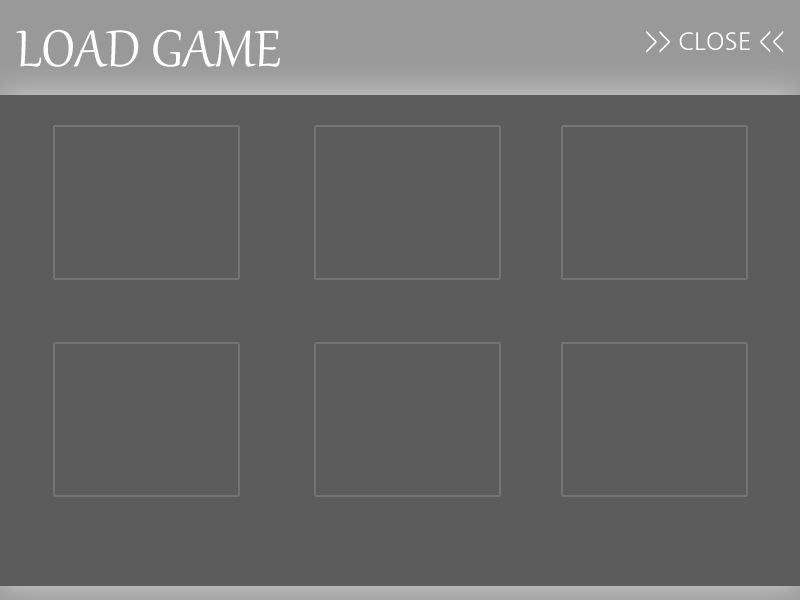
<style>
.page{position:relative;width:800px;height:600px;background:#5c5c5c}
.page>*{position:absolute;margin:0}
.t1{font:63px "Gabriola";color:#ffffff}
.t2{font:24px "NanumGothic";color:#ffffff}
</style>
<div class="page">
<p class="t1" style="left:16px;top:29px;width:264px;height:38px">LOAD GAME</p>
<p class="t2" style="left:646px;top:31px;width:138px;height:22px">&gt;&gt; CLOSE &lt;&lt;</p>
</div>
